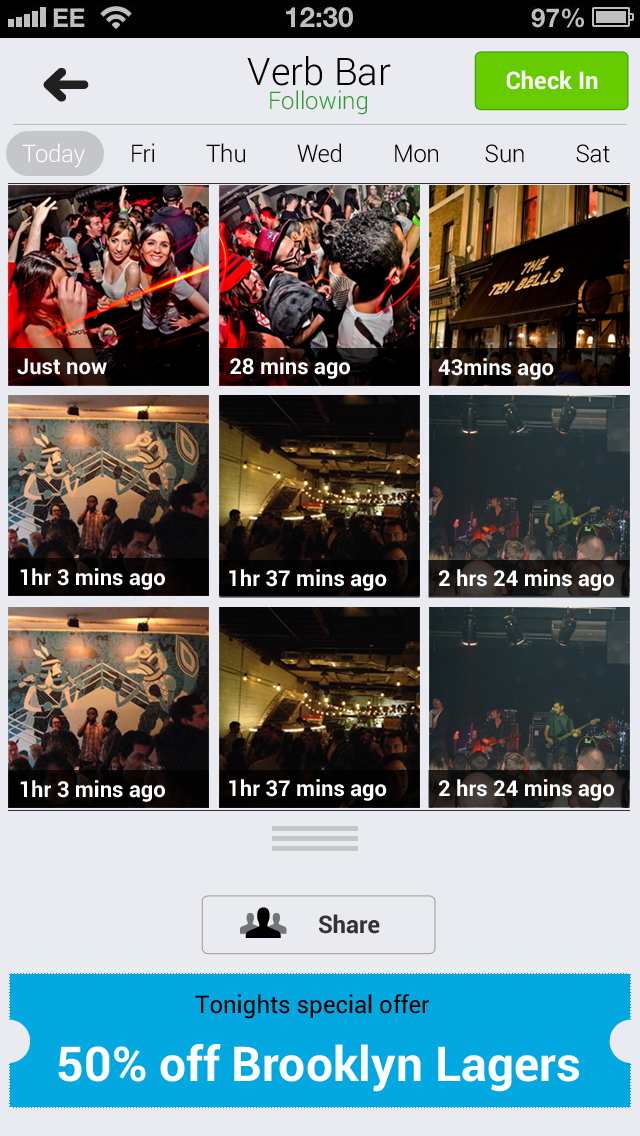
<style>
.page{position:relative;width:640px;height:1136px;background:#e9ebf0}
.page>*{position:absolute;margin:0}
.t1{font:38px "Roboto-Light";color:#000000}
.t2{font:24px "Roboto-Bold";color:#ffffff}
.t3{font:24px "Roboto-Light";color:#339933}
.t4{font:24px "Roboto-Light";letter-spacing:-0.01em;color:#000000}
.t5{font:24px "Roboto-Light";letter-spacing:-0.01em;color:#ffffff}
.t6{font:22px "Roboto-Bold";color:#ffffff}
.t7{font:24px "Roboto-Bold";color:#333333}
.t8{font:24px "Roboto-Regular";color:#000000}
.t9{font:48px "Roboto-Bold";color:#ffffff}
</style>
<div class="page">
<p class="t1" style="left:247px;top:56px;width:144px;height:30px">Verb Bar</p>
<p class="t2" style="left:506px;top:70px;width:92px;height:20px">Check In</p>
<p class="t3" style="left:270px;top:90px;width:97px;height:25px">Following</p>
<p class="t4" style="left:22px;top:143px;width:588px;height:25px"><span class="t5">Today       </span> Fri         Thu         Wed         Mon        Sun         Sat</p>
<p class="t6" style="left:17px;top:358px;width:90px;height:17px">Just now</p>
<p class="t6" style="left:230px;top:357px;width:120px;height:22px">28 mins ago</p>
<p class="t6" style="left:438px;top:358px;width:116px;height:22px">43mins ago</p>
<p class="t6" style="left:20px;top:568px;width:145px;height:22px">1hr 3 mins ago</p>
<p class="t6" style="left:229px;top:569px;width:158px;height:22px">1hr 37 mins ago</p>
<p class="t6" style="left:439px;top:569px;width:175px;height:22px">2 hrs 24 mins ago</p>
<p class="t6" style="left:20px;top:780px;width:145px;height:22px">1hr 3 mins ago</p>
<p class="t6" style="left:229px;top:779px;width:158px;height:22px">1hr 37 mins ago</p>
<p class="t6" style="left:439px;top:779px;width:175px;height:22px">2 hrs 24 mins ago</p>
<p class="t7" style="left:319px;top:914px;width:61px;height:20px">Share</p>
<p class="t8" style="left:195px;top:994px;width:234px;height:25px">Tonights special offer</p>
<p class="t9" style="left:58px;top:1044px;width:521px;height:48px">50% off Brooklyn Lagers</p>
</div>
